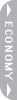
<style>
.page{position:relative;width:17px;height:100px;background:#afb1b4}
.page>*{position:absolute;margin:0}
.t1{font:11px "System";color:#ffffff}
</style>
<div class="page">
<p class="t1" style="left:5px;top:21px;width:8px;height:59px;rotate:90deg">ECONOMY</p>
</div>
